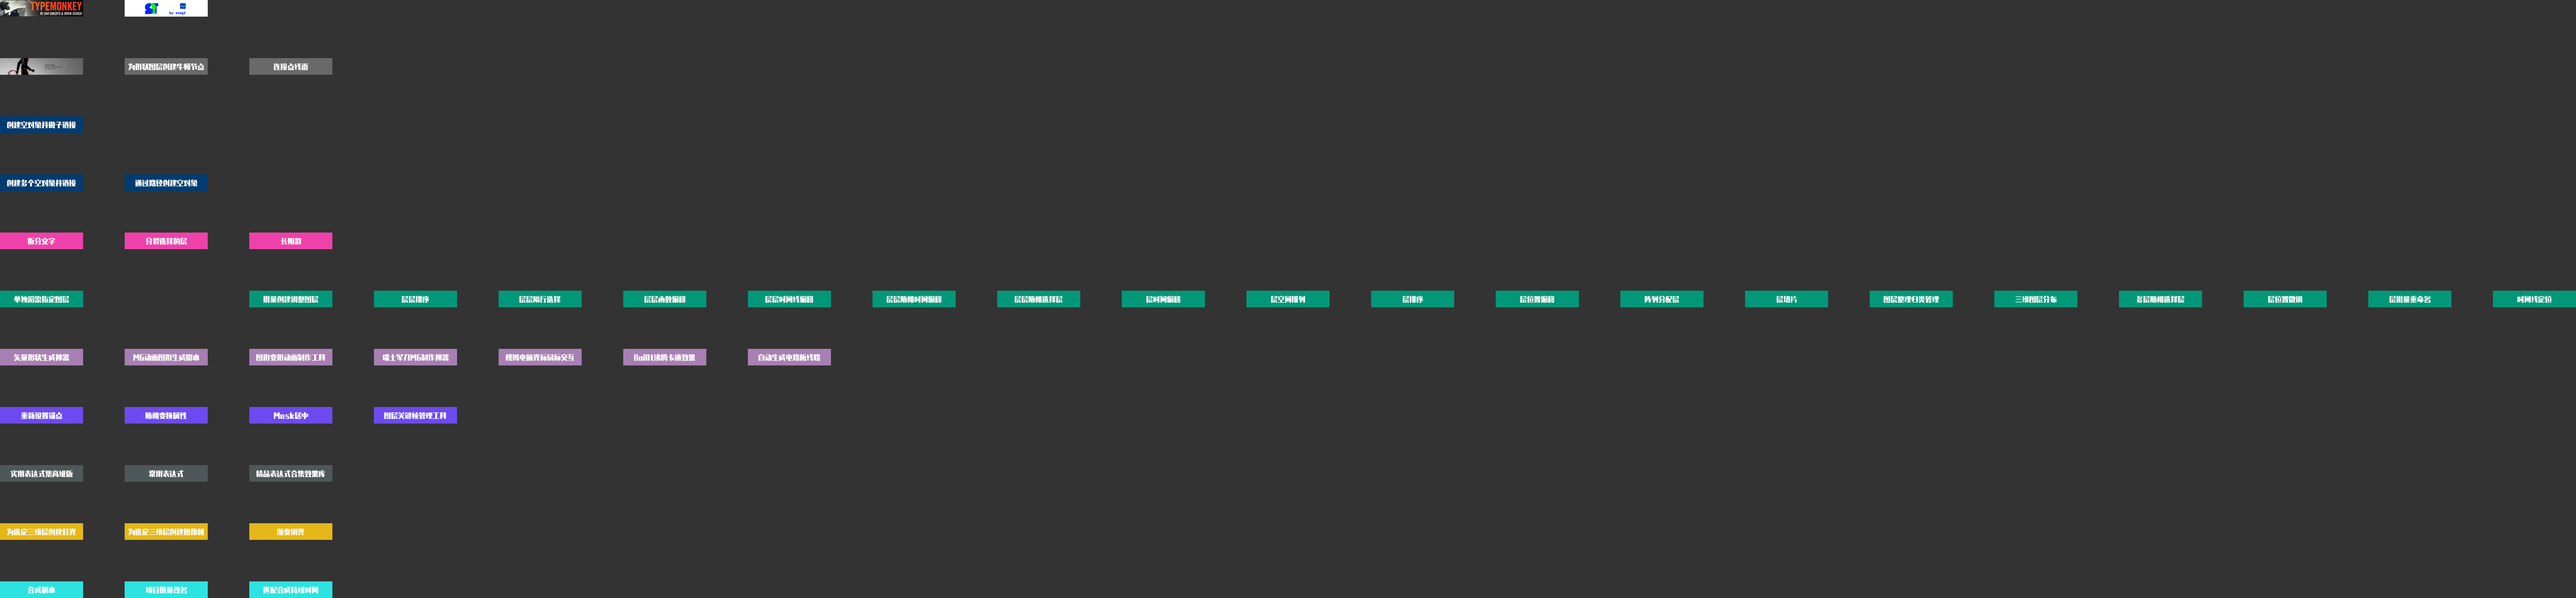
<style>
.page{position:relative;width:2576px;height:598px;background:#333333}
.page>*{position:absolute;margin:0}
.t1{font:6.9px "ZhenyanGB-Regular";color:#ffffff}
</style>
<div class="page">
<p class="t1" style="left:128px;top:63px;width:76px;height:7px">为形状图层创建牛顿节点</p>
<p class="t1" style="left:274px;top:63px;width:34px;height:7px">连接点线面</p>
<p class="t1" style="left:7px;top:121px;width:69px;height:7px">创建空对象并做子链接</p>
<p class="t1" style="left:7px;top:179px;width:69px;height:8px">创建多个空对象并链接</p>
<p class="t1" style="left:135px;top:179px;width:62px;height:8px">通过路径创建空对象</p>
<p class="t1" style="left:27px;top:238px;width:28px;height:7px">拆分文字</p>
<p class="t1" style="left:146px;top:238px;width:41px;height:7px">分裂选择的层</p>
<p class="t1" style="left:280px;top:238px;width:21px;height:7px">长阴影</p>
<p class="t1" style="left:14px;top:296px;width:55px;height:7px">单独渲染指定图层</p>
<p class="t1" style="left:263px;top:296px;width:55px;height:7px">批量创建调整图层</p>
<p class="t1" style="left:402px;top:296px;width:27px;height:7px">层层排序</p>
<p class="t1" style="left:519px;top:296px;width:41px;height:7px">层层隔行选择</p>
<p class="t1" style="left:644px;top:296px;width:42px;height:7px">层层函数偏移</p>
<p class="t1" style="left:765px;top:296px;width:49px;height:7px">层层时间线偏移</p>
<p class="t1" style="left:887px;top:296px;width:54px;height:7px">层层随机时间偏移</p>
<p class="t1" style="left:1015px;top:296px;width:48px;height:7px">层层随机选择层</p>
<p class="t1" style="left:1146px;top:296px;width:34px;height:7px">层时间偏移</p>
<p class="t1" style="left:1271px;top:296px;width:34px;height:7px">层空间排列</p>
<p class="t1" style="left:1403px;top:296px;width:20px;height:7px">层排序</p>
<p class="t1" style="left:1520px;top:296px;width:34px;height:7px">层位置偏移</p>
<p class="t1" style="left:1644px;top:296px;width:35px;height:7px">阵列分配层</p>
<p class="t1" style="left:1777px;top:296px;width:20px;height:7px">层切片</p>
<p class="t1" style="left:1883px;top:296px;width:56px;height:7px">图层整理归类管理</p>
<p class="t1" style="left:2016px;top:296px;width:41px;height:7px">三维图层分布</p>
<p class="t1" style="left:2137px;top:296px;width:48px;height:7px">多层随机选择层</p>
<p class="t1" style="left:2268px;top:296px;width:34px;height:7px">层位置微调</p>
<p class="t1" style="left:2389px;top:296px;width:42px;height:7px">层批量重命名</p>
<p class="t1" style="left:2517px;top:296px;width:35px;height:7px">时间线定位</p>
<p class="t1" style="left:14px;top:354px;width:55px;height:7px">矢量形状生成神器</p>
<p class="t1" style="left:133px;top:354px;width:66px;height:7px">MG动画图形生成脚本</p>
<p class="t1" style="left:256px;top:354px;width:69px;height:7px">图形变形动画制作工具</p>
<p class="t1" style="left:382px;top:354px;width:67px;height:7px">瑞士军刀MG制作神器</p>
<p class="t1" style="left:505px;top:354px;width:70px;height:7px">模拟电脑光标鼠标交互</p>
<p class="t1" style="left:634px;top:354px;width:61px;height:7px">BoilIt沸腾卡通效果</p>
<p class="t1" style="left:758px;top:354px;width:62px;height:7px">自动生成电路板线路</p>
<p class="t1" style="left:21px;top:412px;width:41px;height:7px">重新设置锚点</p>
<p class="t1" style="left:145px;top:412px;width:42px;height:7px">随机变换属性</p>
<p class="t1" style="left:274px;top:412px;width:34px;height:7px">Mask居中</p>
<p class="t1" style="left:384px;top:412px;width:63px;height:7px">图层关键帧管理工具</p>
<p class="t1" style="left:10px;top:470px;width:63px;height:7px">实用表达式集高级版</p>
<p class="t1" style="left:149px;top:470px;width:35px;height:7px">常用表达式</p>
<p class="t1" style="left:256px;top:470px;width:69px;height:7px">精品表达式合集效果库</p>
<p class="t1" style="left:7px;top:528px;width:69px;height:8px">为选定三维层创建灯光</p>
<p class="t1" style="left:128px;top:528px;width:76px;height:8px">为选定三维层创建摄像机</p>
<p class="t1" style="left:277px;top:528px;width:28px;height:8px">渐变调光</p>
<p class="t1" style="left:27px;top:587px;width:28px;height:7px">合成副本</p>
<p class="t1" style="left:145px;top:587px;width:42px;height:7px">项目批量改名</p>
<p class="t1" style="left:263px;top:587px;width:55px;height:7px">匹配合成持续时间</p>
</div>
